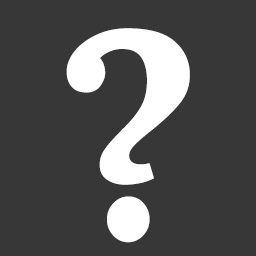
<style>
.page{position:relative;width:256px;height:256px;background:#373737}
.page>*{position:absolute;margin:0}
.t1{font:291.9px "Lora-Bold";color:#ffffff}
</style>
<div class="page">
<p class="t1" style="left:66px;top:28px;width:124px;height:215px">?</p>
</div>
